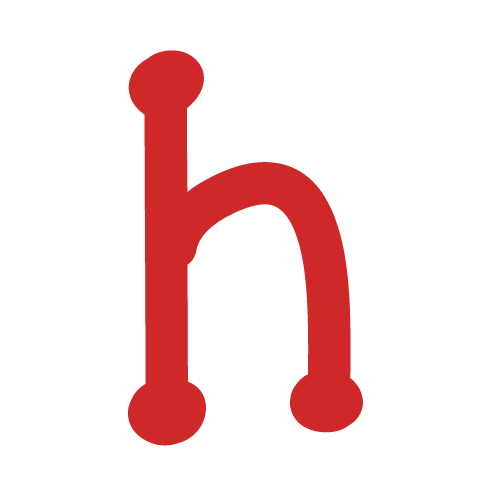
<style>
.page{position:relative;width:492px;height:492px;background:#ffffff}
.page>*{position:absolute;margin:0}
.t1{font:463.3px "GelDoticaLowerCaseThick";color:#ce2828}
</style>
<div class="page">
<p class="t1" style="left:128px;top:50px;width:235px;height:396px">h</p>
</div>
